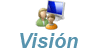
<style>
.page{position:relative;width:100px;height:50px;background:#ffffff}
.page>*{position:absolute;margin:0}
.t1{font:20px "Arial-BoldItalicMT";color:#5894ae}
</style>
<div class="page">
<p class="t1" style="left:20px;top:33px;width:58px;height:15px">Visión</p>
</div>
